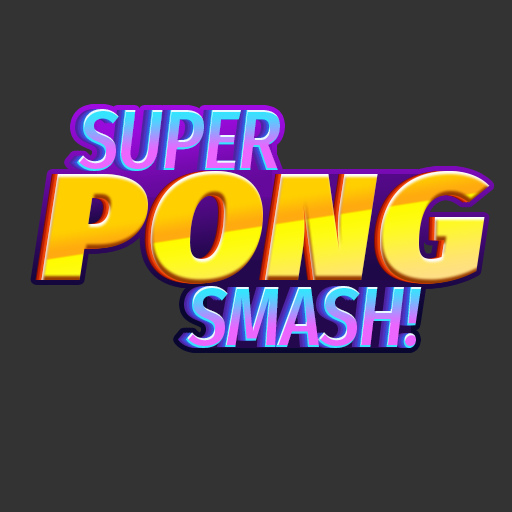
<style>
.page{position:relative;width:512px;height:512px;background:#333333}
.page>*{position:absolute;margin:0}
.t1{font:86.6px "FiraSans-SemiBoldItalic";letter-spacing:-0.025em;scale:0.83 1}
.t2{font:151.5px "FiraSans-UltraItalic";letter-spacing:0.025em;scale:1.11 1}
</style>
<div class="page">
<p class="t1" style="left:77px;top:109px;width:203px;height:62px">SUPER</p>
<p class="t2" style="left:41px;top:171px;width:449px;height:113px">PONG</p>
<p class="t1" style="left:186px;top:286px;width:236px;height:62px">SMASH!</p>
</div>
